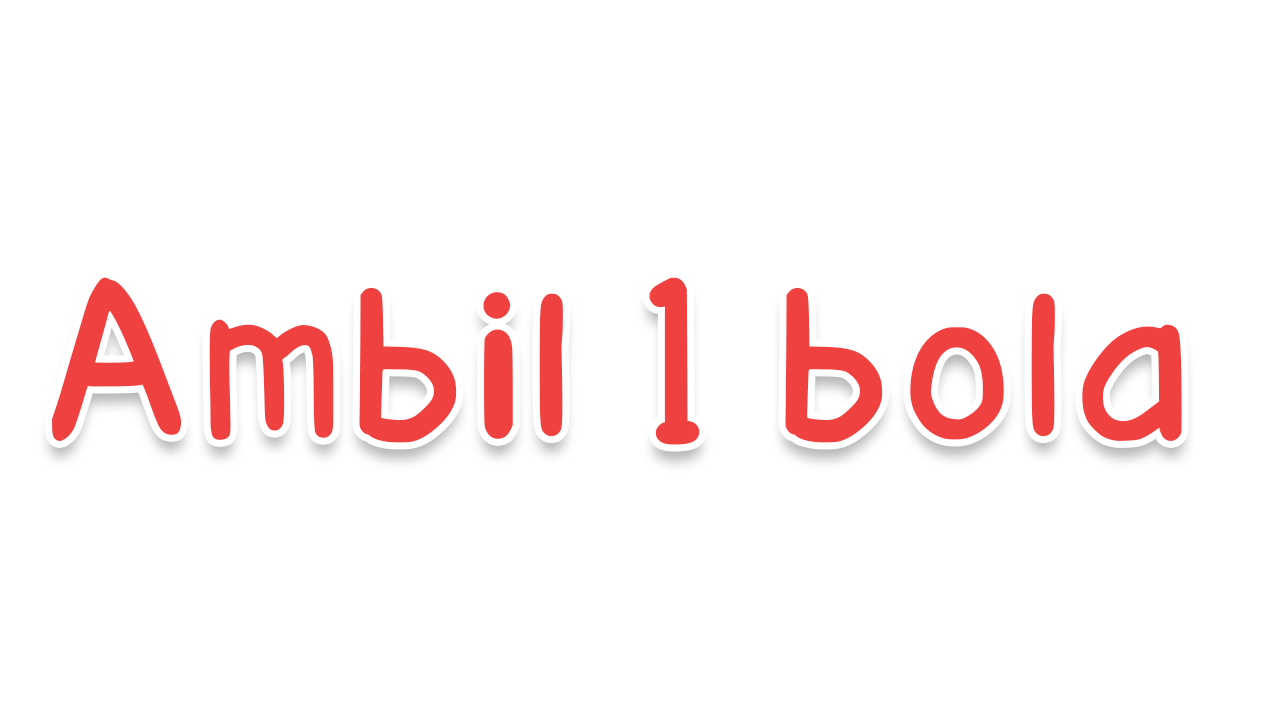
<style>
.page{position:relative;width:1280px;height:720px;background:#ffffff}
.page>*{position:absolute;margin:0}
.t1{font:211.5px "FontByHuanghuw-Regular";color:#f04141;font-weight:bold}
</style>
<div class="page">
<p class="t1" style="left:52px;top:277px;width:1130px;height:168px">Ambil 1 bola</p>
</div>
